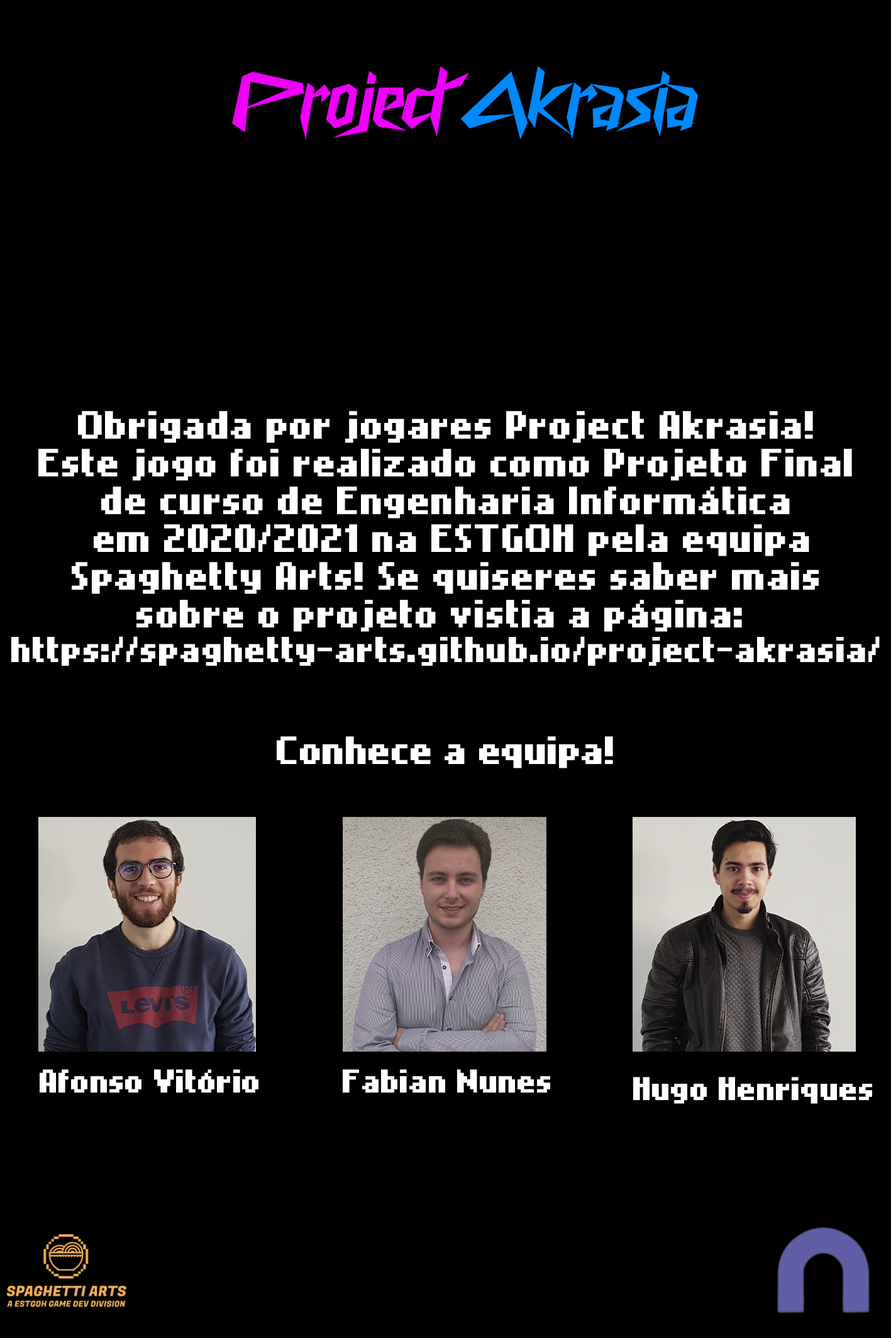
<style>
.page{position:relative;width:891px;height:1338px;background:#000000}
.page>*{position:absolute;margin:0}
.t1{font:78.6px "CyberwayRiders";color:#ed00fc}
.t2{font:78.6px "CyberwayRiders";color:#0088fc}
.t3{font:31.5px "NokiaCellphoneFC-Small";color:#ffffff}
.t4{font:28.8px "NokiaCellphoneFC-Small";color:#ffffff}
.t5{font:31.5px "NokiaCellphoneFC-Small";letter-spacing:-0.02em;color:#ffffff}
.t6{font:26.2px "NokiaCellphoneFC-Small";letter-spacing:-0.02em;color:#ffffff}
</style>
<div class="page">
<p class="t1" style="left:232px;top:66px;width:467px;height:74px">Project <span class="t2">Akrasia</span></p>
<p class="t3" style="left:11px;top:411px;width:869px;height:255px;text-align:center">Obrigada por jogares Project Akrasia!<br>Este jogo foi realizado como Projeto Final<br>de curso de Engenharia Informática<br> em 2020/2021 na ESTGOH pela equipa<br>Spaghetty Arts! Se quiseres saber mais<br>sobre o projeto vistia a página: <br><span class="t4">https://spaghetty-arts.github.io/project-akrasia/</span></p>
<p class="t5" style="left:277px;top:736px;width:336px;height:32px">Conhece a equipa!</p>
<p class="t6" style="left:40px;top:1069px;width:219px;height:23px">Afonso Vitório</p>
<p class="t6" style="left:343px;top:1069px;width:208px;height:23px">Fabian Nunes</p>
<p class="t6" style="left:634px;top:1076px;width:239px;height:28px">Hugo Henriques</p>
</div>
